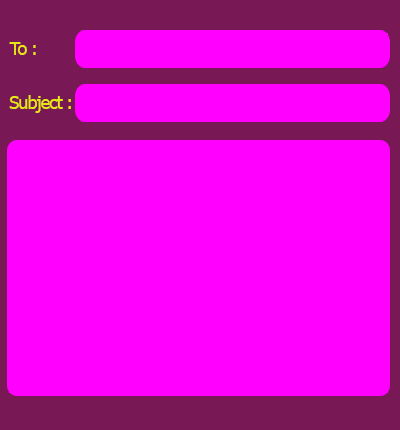
<style>
.page{position:relative;width:400px;height:430px;background:#ff00ff}
.page>*{position:absolute;margin:0}
.t1{font:18px "Tahoma";letter-spacing:-0.05em;color:#e8e613}
</style>
<div class="page">
<p class="t1" style="left:9px;top:42px;width:27px;height:13px">To :</p>
<p class="t1" style="left:9px;top:95px;width:62px;height:18px">Subject :</p>
</div>
